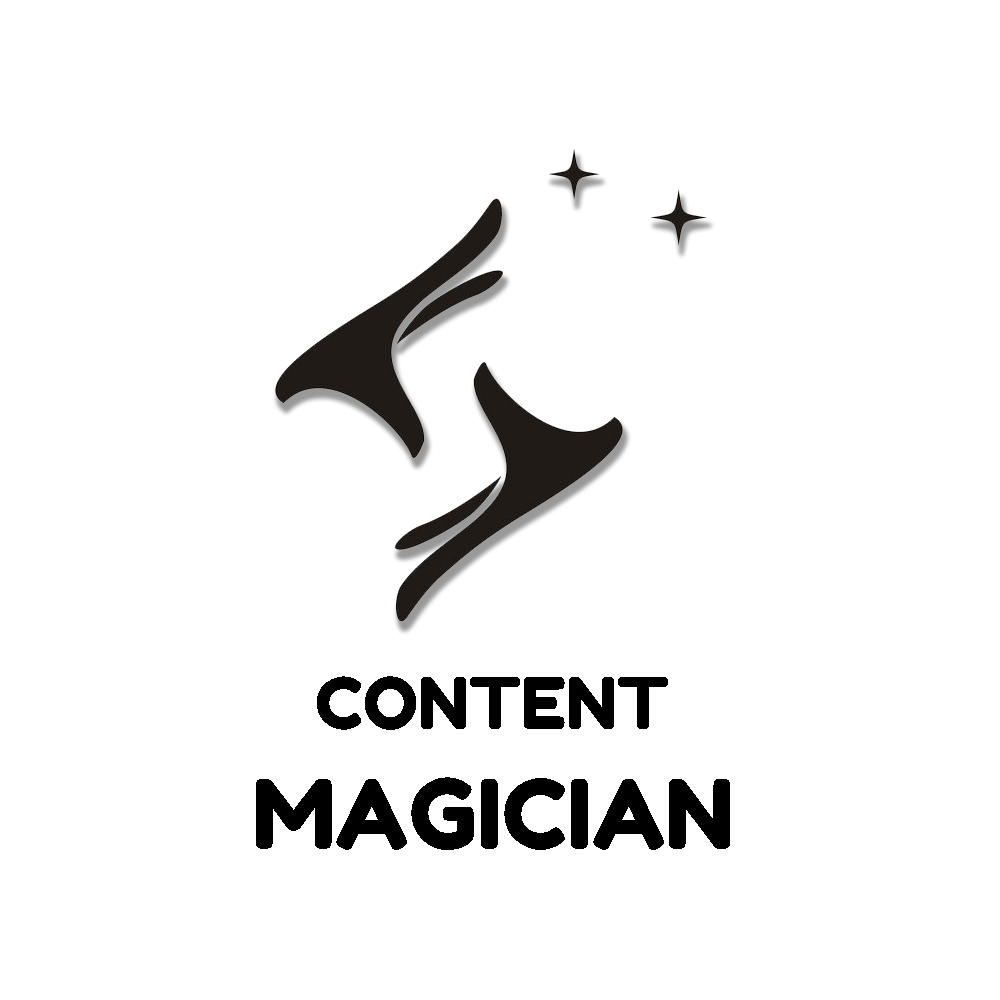
<style>
.page{position:relative;width:1000px;height:1000px;background:#ffffff}
.page>*{position:absolute;margin:0}
.t1{font:70.8px "FredokaOne-Regular";color:#000000;text-transform:uppercase}
.t2{font:95.8px "FredokaOne-Regular";color:#000000;text-transform:uppercase}
</style>
<div class="page">
<p class="t1" style="left:317px;top:676px;width:351px;height:54px">Content</p>
<p class="t2" style="left:256px;top:777px;width:474px;height:73px">magician</p>
</div>
